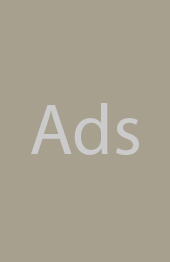
<style>
.page{position:relative;width:170px;height:262px;background:#a8a08e}
.page>*{position:absolute;margin:0}
.t1{font:72px "MyriadPro-Regular";color:#cbcbcb}
</style>
<div class="page">
<p class="t1" style="left:31px;top:103px;width:108px;height:52px">Ads</p>
</div>
